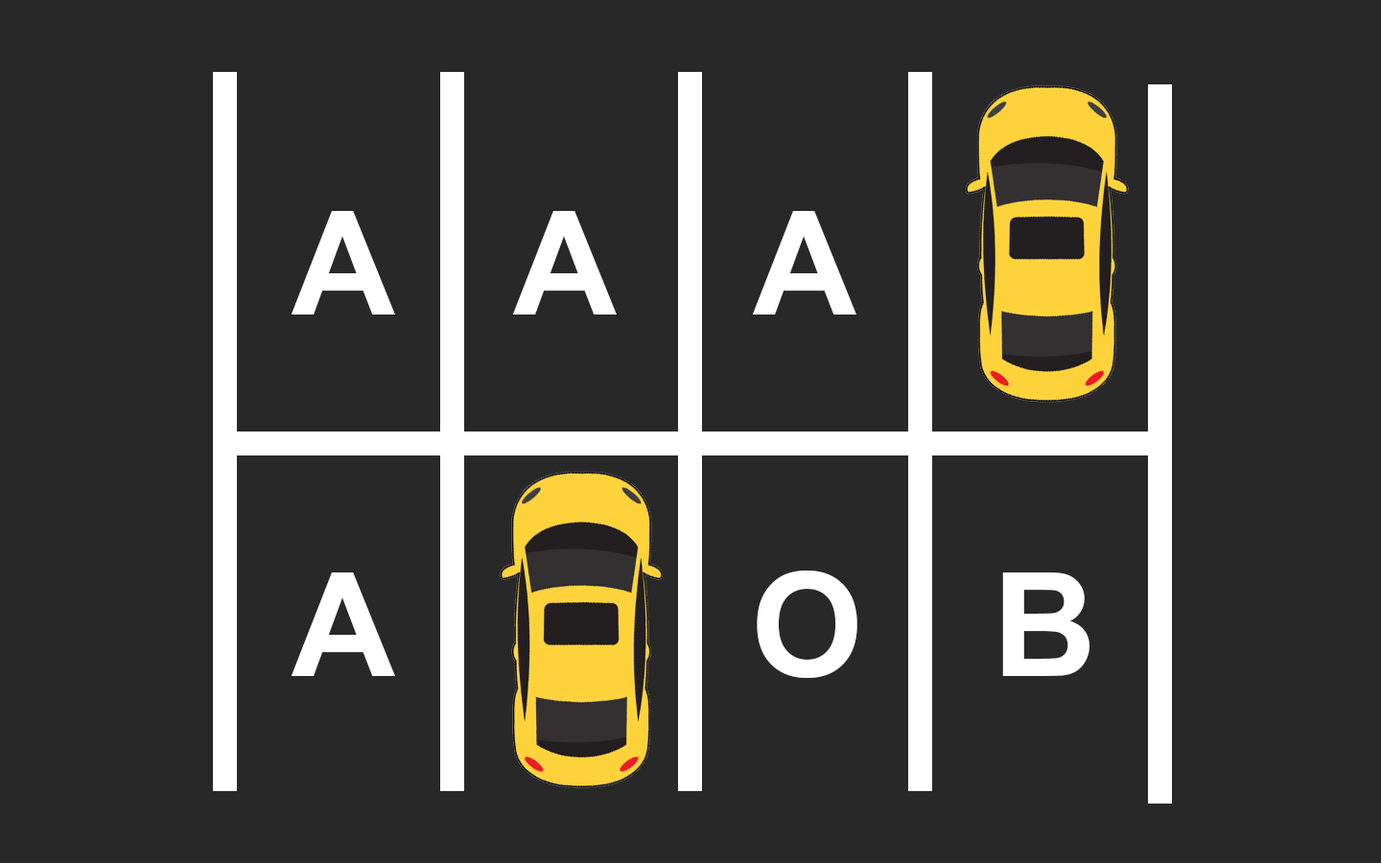
<style>
.page{position:relative;width:1381px;height:863px;background:#282828}
.page>*{position:absolute;margin:0}
.t1{font:143.9px "Arial-BoldMT";color:#ffffff}
</style>
<div class="page">
<p class="t1" style="left:292px;top:211px;width:103px;height:104px">A</p>
<p class="t1" style="left:513px;top:211px;width:104px;height:104px">A</p>
<p class="t1" style="left:753px;top:211px;width:104px;height:104px">A</p>
<p class="t1" style="left:292px;top:573px;width:103px;height:103px">A</p>
<p class="t1" style="left:757px;top:571px;width:101px;height:107px">O</p>
<p class="t1" style="left:1002px;top:573px;width:88px;height:103px">B</p>
</div>
